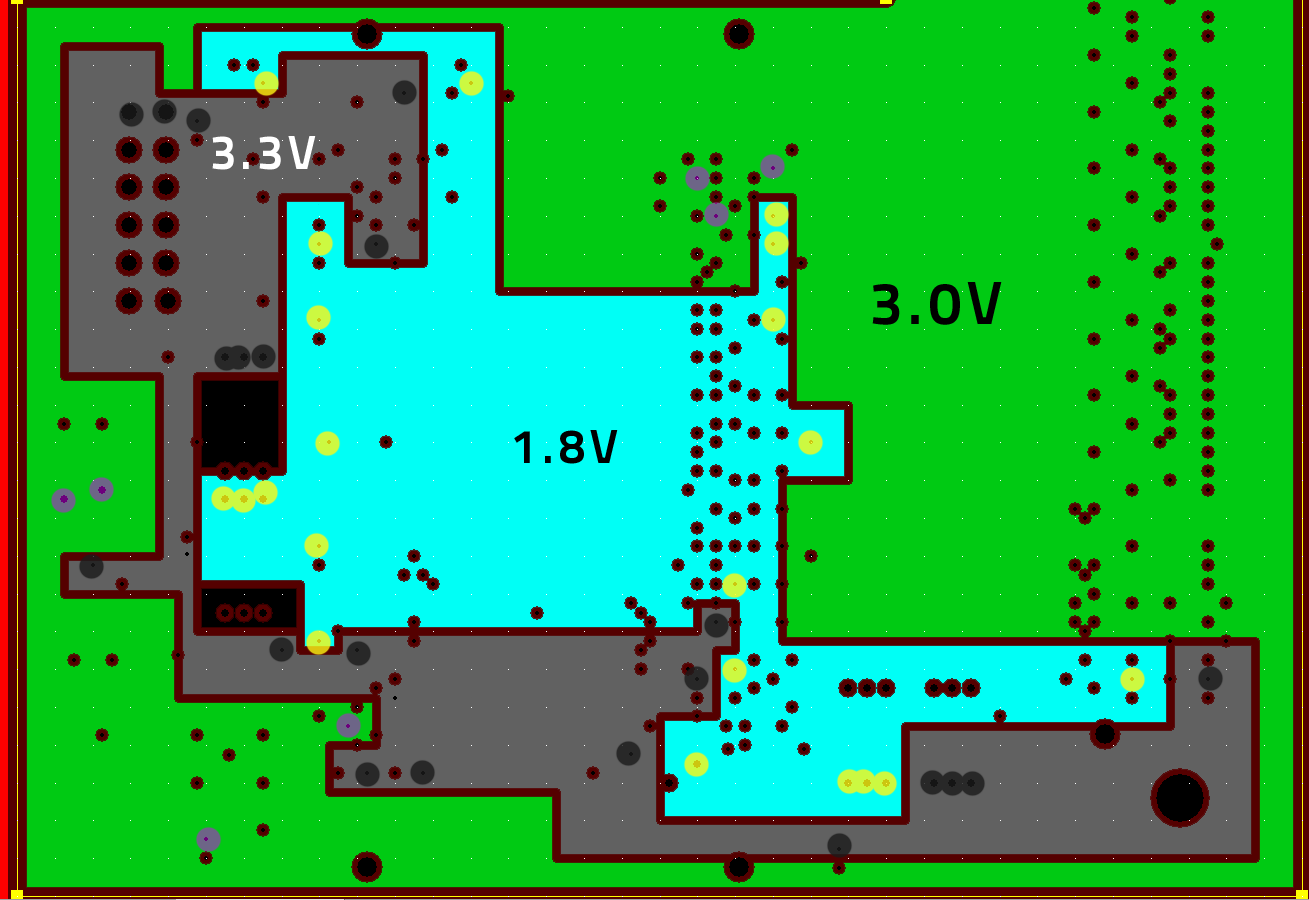
<style>
.page{position:relative;width:1309px;height:900px;background:#00ca13}
.page>*{position:absolute;margin:0}
.t1{font:48px "TitilliumText22L-Bold";letter-spacing:0.1em;color:#ffffff}
.t2{font:60px "TitilliumText22L-Bold";letter-spacing:0.1em;color:#000000}
.t3{font:48px "TitilliumText22L-Bold";letter-spacing:0.1em;color:#000000}
</style>
<div class="page">
<p class="t1" style="left:212px;top:136px;width:104px;height:34px">3.3V</p>
<p class="t2" style="left:872px;top:282px;width:130px;height:43px">3.0V</p>
<p class="t3" style="left:514px;top:430px;width:104px;height:34px">1.8V</p>
</div>
